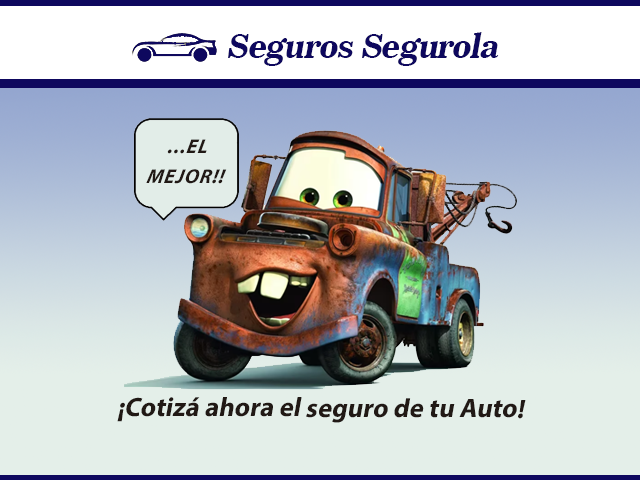
<style>
.page{position:relative;width:640px;height:480px}
.page>*{position:absolute;margin:0}
.t1{font:33.3px "News706BT-BoldC";letter-spacing:-0.025em;color:#0e085e;font-style:italic}
.t2{font:20px/30px "MyriadPro-BoldIt";letter-spacing:0.05em;color:#211915;font-style:italic}
.t3{font:26.7px "MyriadPro-Bold";color:#211915;font-style:italic}
</style>
<div class="page">
<p class="t1" style="left:228px;top:32px;width:271px;height:34px">Seguros Segurola</p>
<p class="t2" style="left:146px;top:139px;width:81px;height:45px;text-align:center">...EL<br>MEJOR!!</p>
<p class="t3" style="left:117px;top:397px;width:409px;height:26px">¡Cotizá ahora el seguro de tu Auto!</p>
</div>
